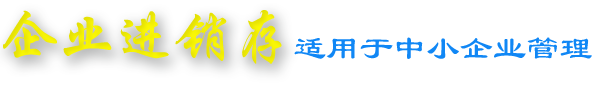
<style>
.page{position:relative;width:600px;height:94px;background:#ffffff}
.page>*{position:absolute;margin:0}
.t1{font:58.3px "STXingkai";color:#fbf805}
.t2{font:33.3px "LiSu";color:#1087f5}
</style>
<div class="page">
<p class="t1" style="left:3px;top:10px;width:279px;height:54px">企业进销存</p>
<p class="t2" style="left:294px;top:37px;width:298px;height:22px">适用于中小企业管理</p>
</div>
